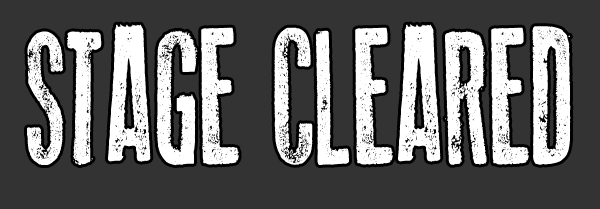
<style>
.page{position:relative;width:600px;height:209px;background:#333333}
.page>*{position:absolute;margin:0}
.t1{font:190px "OldPress";color:#ffffff;scale:0.65 1}
</style>
<div class="page">
<p class="t1" style="left:27px;top:24px;width:544px;height:142px">STAGE CLEARED</p>
</div>
